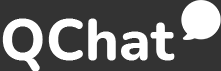
<style>
.page{position:relative;width:221px;height:71px;background:#333333}
.page>*{position:absolute;margin:0}
.t1{font:57.1px "Nunito-ExtraBold";color:#ffffff}
</style>
<div class="page">
<p class="t1" style="left:2px;top:18px;width:173px;height:54px">QChat</p>
</div>
